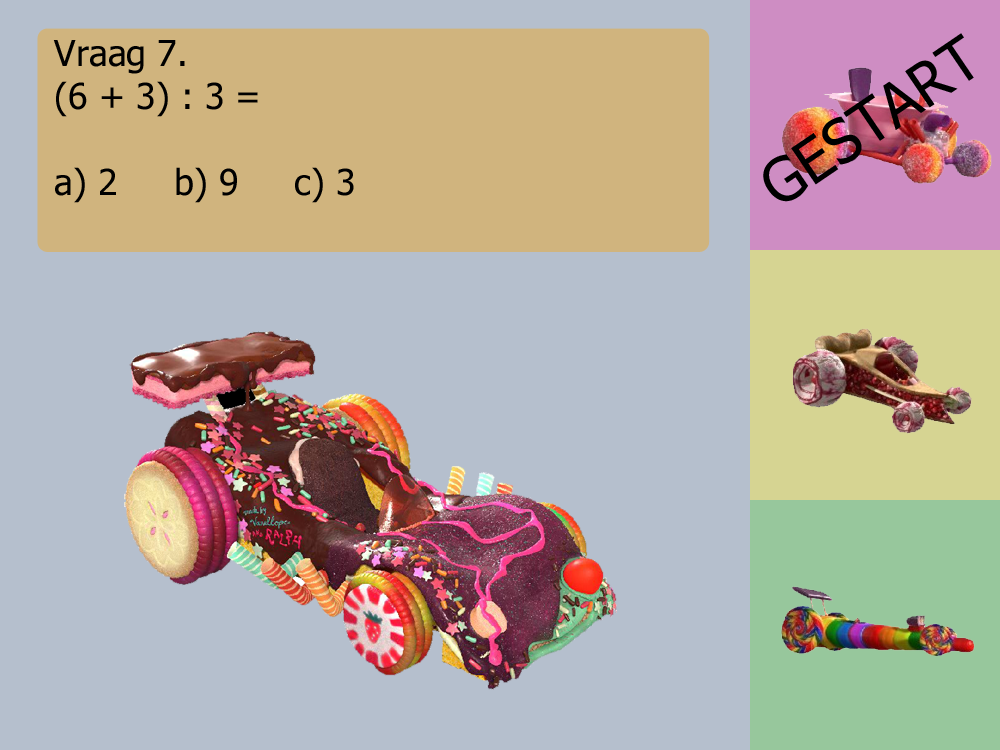
<style>
.page{position:relative;width:1000px;height:750px;background:#b5bfcd}
.page>*{position:absolute;margin:0}
.t1{font:35.9px "Tahoma";color:#000000}
.t2{font:60.6px "Tahoma";color:#000000}
</style>
<div class="page">
<p class="t1" style="left:53px;top:40px;width:301px;height:163px">Vraag 7.<br>(6 + 3) : 3 = <br><br>a) 2     b) 9     c) 3</p>
<p class="t2" style="left:763px;top:33px;width:211px;height:169px;rotate:-34deg">GESTART</p>
</div>
